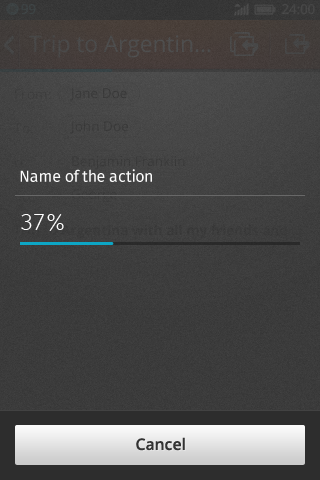
<style>
.page{position:relative;width:320px;height:480px}
.page>*{position:absolute;margin:0}
.t1{font:16px "MozTT";letter-spacing:-0.015em;color:#fbfbfb}
.t2{font:22.5px "MozTTLight";color:#ffffff}
.t3{font:15.8px "OpenSans-Semibold";color:#333333}
</style>
<div class="page">
<p class="t1" style="left:20px;top:169px;width:132px;height:13px">Name of the action</p>
<p class="t2" style="left:21px;top:214px;width:43px;height:17px">37%</p>
<p class="t3" style="left:136px;top:437px;width:49px;height:14px">Cancel</p>
</div>
